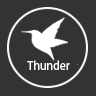
<style>
.page{position:relative;width:96px;height:96px;background:#333333}
.page>*{position:absolute;margin:0}
.t1{font:11px "AdobeHeitiStd-Regular";color:#ffffff}
</style>
<div class="page">
<p class="t1" style="left:27px;top:60px;width:43px;height:10px">Thunder</p>
</div>
